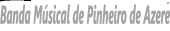
<style>
.page{position:relative;width:170px;height:31px;background:#ffffff}
.page>*{position:absolute;margin:0}
.t1{font:25.6px "SegoeUI-BoldItalic";color:#a2a2a2;scale:0.4 1}
</style>
<div class="page">
<p class="t1" style="left:0px;top:0px;width:170px;height:24px">Banda Músical de Pinheiro de Ázere</p>
</div>
